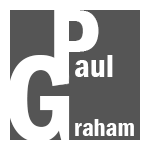
<style>
.page{position:relative;width:150px;height:150px;background:#555555}
.page>*{position:absolute;margin:0}
.t1{font:100px "FranklinGothic-DemiCond";color:#ffffff}
.t2{font:125px "FranklinGothic-DemiCond";color:#ffffff}
.t3{font:33.3px "FranklinGothic-DemiCond";color:#ffffff}
.t4{font:25px "FranklinGothic-DemiCond";color:#ffffff}
</style>
<div class="page">
<p class="t1" style="left:54px;top:10px;width:45px;height:67px">P</p>
<p class="t2" style="left:7px;top:55px;width:63px;height:87px">G</p>
<p class="t3" style="left:75px;top:55px;width:38px;height:22px">aul</p>
<p class="t4" style="left:75px;top:119px;width:59px;height:17px">raham</p>
</div>
